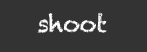
<style>
.page{position:relative;width:147px;height:52px;background:#333333}
.page>*{position:absolute;margin:0}
.t1{font:24px "Chalkduster";letter-spacing:-0.02em;color:#fcfafa}
</style>
<div class="page">
<p class="t1" style="left:37px;top:12px;width:70px;height:21px">shoot</p>
</div>
